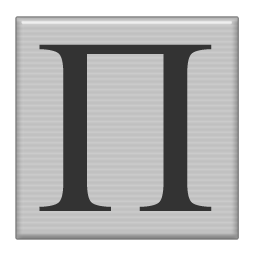
<style>
.page{position:relative;width:256px;height:256px;background:#ffffff}
.page>*{position:absolute;margin:0}
.t1{font:249.7px "TimesNewRomanPSMT";letter-spacing:-0.075em;color:#333333}
</style>
<div class="page">
<p class="t1" style="left:39px;top:44px;width:173px;height:167px">Π</p>
</div>
